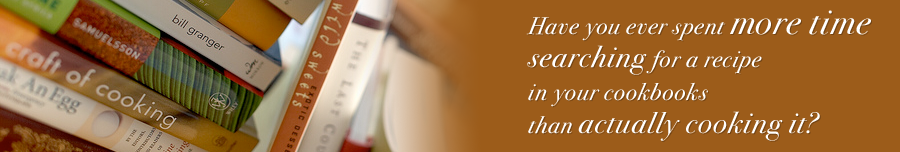
<style>
.page{position:relative;width:900px;height:152px;background:#9c5c1a}
.page>*{position:absolute;margin:0}
.t1{font:24px/33px "BodoniSvtyTwoITCTTBookIta";letter-spacing:0.04em;color:#ffffff}
.t2{font:36px/33px "BodoniSvtyTwoITCTTBookIta";letter-spacing:0.04em;color:#ffffff}
.t3{font:30px/33px "BodoniSvtyTwoITCTTBookIta";letter-spacing:0.04em;color:#ffffff}
.t4{font:24px/33px "BodoniSvtyTwoITCTTBookIta";letter-spacing:0.04em}
.t5{font:36px/33px "BodoniSvtyTwoITCTTBookIta";letter-spacing:0.04em}
.t6{font:30px/33px "BodoniSvtyTwoITCTTBookIta";letter-spacing:0.04em}
</style>
<div class="page">
<p class="t1" style="left:526px;top:10px;width:345px;height:131px">Have you ever spent <span class="t2">more time <br></span><span class="t3">searching </span>for a recipe <br>in your cookbooks <br>than <span class="t3">actually cooking it?</span></p>
<p class="t4" style="left:527px;top:11px;width:345px;height:131px">Have you ever spent <span class="t5">more time <br></span><span class="t6">searching </span>for a recipe <br>in your cookbooks <br>than <span class="t6">actually cooking it?</span></p>
</div>
